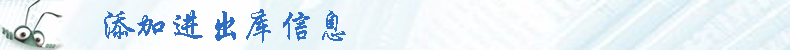
<style>
.page{position:relative;width:790px;height:50px}
.page>*{position:absolute;margin:0}
.t1{font:36px "STXingkai";color:#2f6ec3}
</style>
<div class="page">
<p class="t1" style="left:104px;top:9px;width:242px;height:34px">添加进出库信息</p>
</div>
